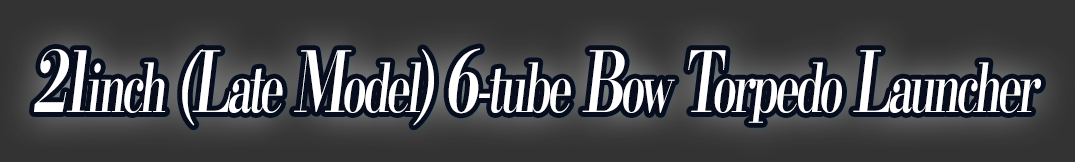
<style>
.page{position:relative;width:1075px;height:162px;background:#333333}
.page>*{position:absolute;margin:0}
.t1{font:67.2px "KochoStd-Heavy";letter-spacing:-0.08em;color:#ffffff;font-style:italic;scale:0.66 1}
.t2{font:84px "KochoStd-Heavy";letter-spacing:-0.08em;color:#ffffff;font-style:italic;scale:0.66 1}
</style>
<div class="page">
<p class="t1" style="left:34px;top:48px;width:1007px;height:78px"><span class="t2">21</span>inch<span class="t2"> (L</span>ate<span class="t2"> M</span>odel<span class="t2">) 6</span>-tube<span class="t2"> B</span>ow<span class="t2"> T</span>orpedo<span class="t2"> L</span>auncher</p>
</div>
